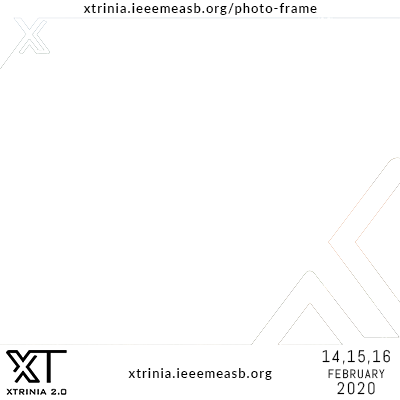
<style>
.page{position:relative;width:400px;height:400px;background:#ffffff}
.page>*{position:absolute;margin:0}
.t1{font:12.5px "Lato-Semibold";letter-spacing:0.1em;color:#000000}
</style>
<div class="page">
<p class="t1" style="left:83px;top:3px;width:234px;height:12px">xtrinia.ieeemeasb.org/photo-frame</p>
<p class="t1" style="left:128px;top:368px;width:144px;height:12px">xtrinia.ieeemeasb.org</p>
</div>
